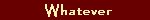
<style>
.page{position:relative;width:150px;height:20px;background:#680000}
.page>*{position:absolute;margin:0}
.t1{font:14px "Papyrus-Regular";color:#fff3ac;font-weight:bold}
</style>
<div class="page">
<p class="t1" style="left:45px;top:4px;width:67px;height:13px">Whatever</p>
</div>
